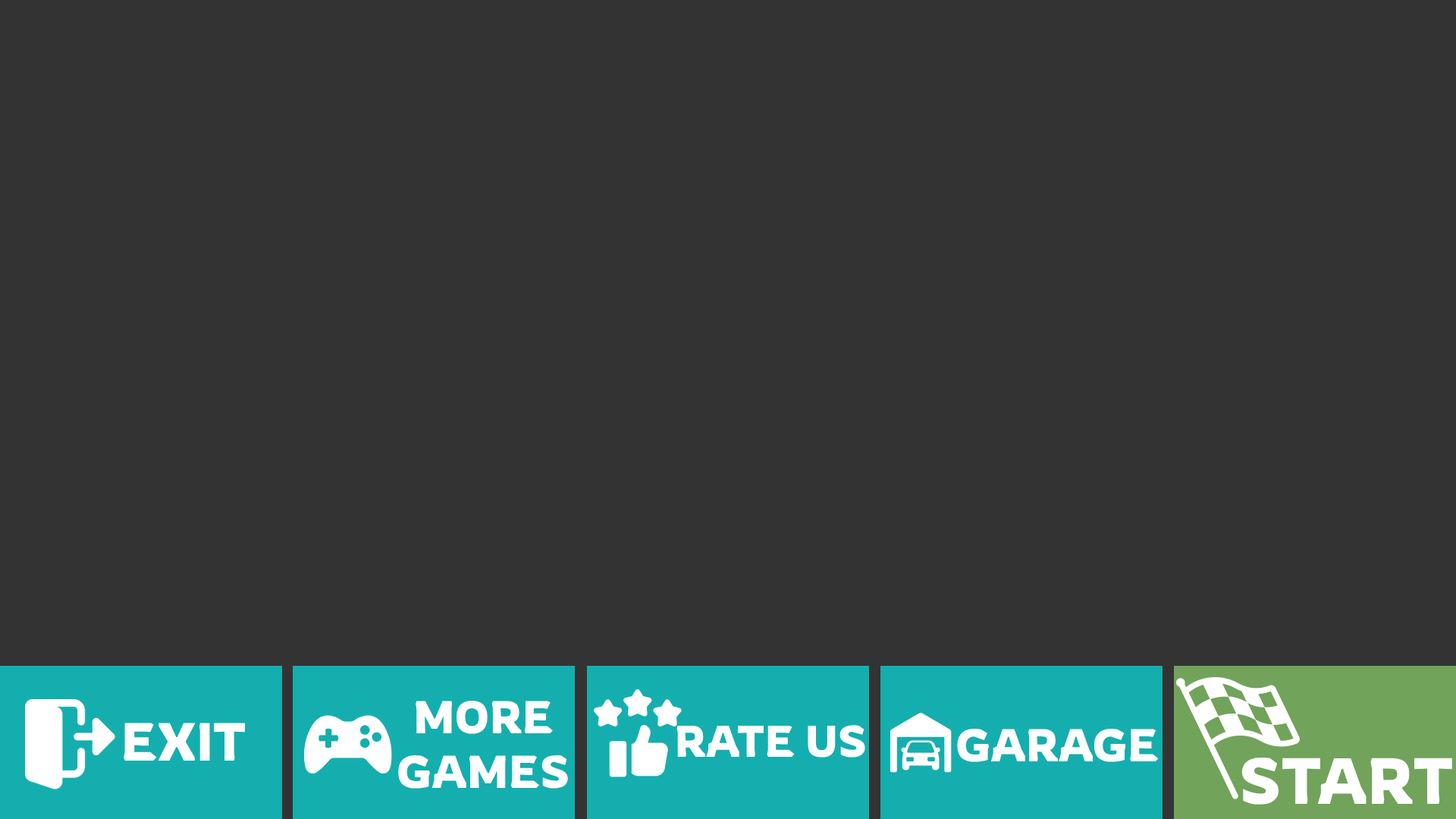
<style>
.page{position:relative;width:1456px;height:819px;background:#333333}
.page>*{position:absolute;margin:0}
.t1{font:45.5px "Rowdies-Regular";color:#ffffff}
.t2{font:53.1px "Rowdies-Regular";color:#ffffff}
.t3{font:44px "Rowdies-Regular";color:#ffffff}
.t4{font:64.5px "Rowdies-Regular";color:#ffffff}
</style>
<div class="page">
<p class="t1" style="left:398px;top:700px;width:170px;height:89px;text-align:center">MORE<br>GAMES</p>
<p class="t2" style="left:124px;top:723px;width:122px;height:38px">EXIT</p>
<p class="t3" style="left:676px;top:725px;width:189px;height:33px">RATE US</p>
<p class="t1" style="left:957px;top:728px;width:202px;height:34px">GARAGE</p>
<p class="t4" style="left:1241px;top:757px;width:211px;height:48px">START</p>
</div>
